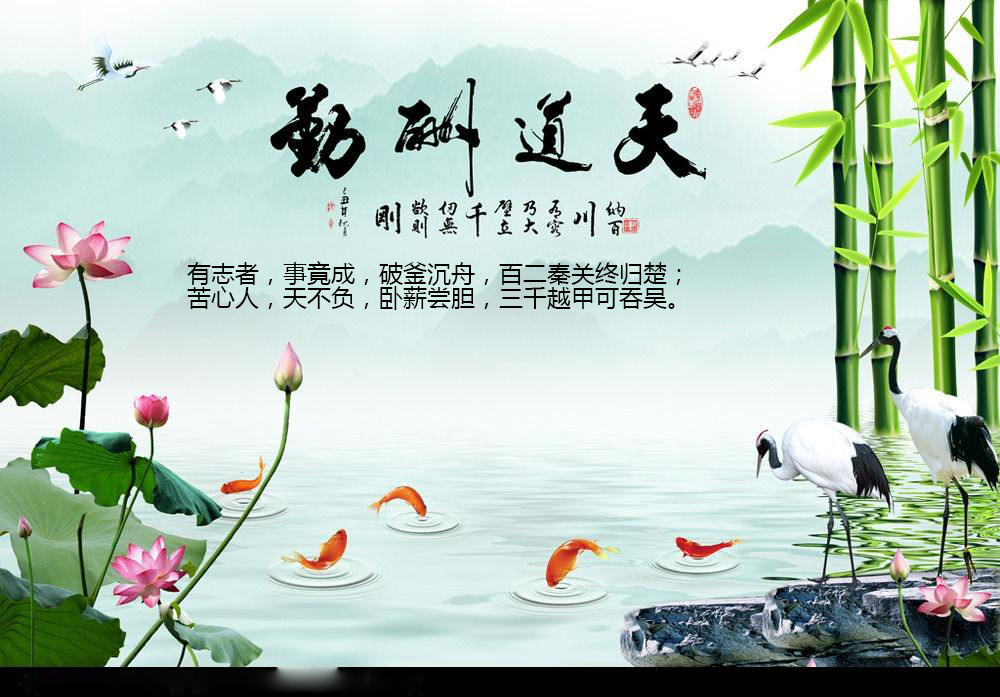
<style>
.page{position:relative;width:1000px;height:697px}
.page>*{position:absolute;margin:0}
.t1{font:24px "MicrosoftYaHei";color:#000000}
</style>
<div class="page">
<p class="t1" style="left:187px;top:261px;width:494px;height:25px">有志者，事竟成，破釜沉舟，百二秦关终归楚；</p>
<p class="t1" style="left:187px;top:286px;width:488px;height:24px">苦心人，天不负，卧薪尝胆，三千越甲可吞吴。</p>
</div>
